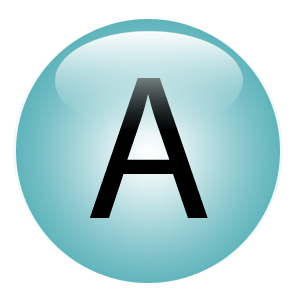
<style>
.page{position:relative;width:300px;height:300px;background:#ffffff}
.page>*{position:absolute;margin:0}
.t1{font:208.3px "MyriadPro-Regular";color:#000000}
</style>
<div class="page">
<p class="t1" style="left:90px;top:78px;width:118px;height:140px">A</p>
</div>
